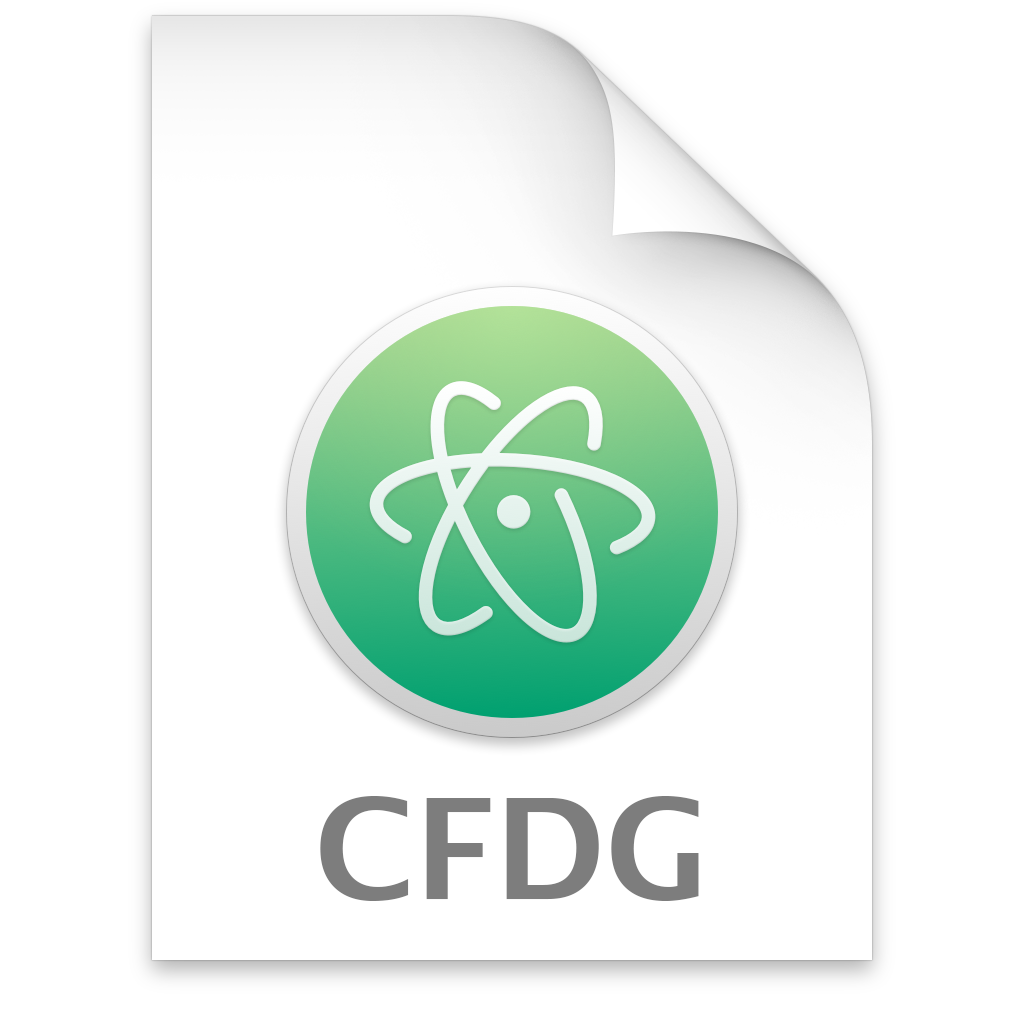
<style>
.page{position:relative;width:1024px;height:1024px;background:#ffffff}
.page>*{position:absolute;margin:0}
.t1{font:140px "LucidaGrande-Bold";color:#7d7d7d}
</style>
<div class="page">
<p class="t1" style="left:320px;top:796px;width:379px;height:105px">CFDG</p>
</div>
